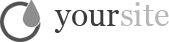
<style>
.page{position:relative;width:169px;height:42px;background:#ffffff}
.page>*{position:absolute;margin:0}
.t1{font:32px "Georgia";color:#3c3c3c}
.t2{font:32px "Georgia";color:#b7b7b7}
</style>
<div class="page">
<p class="t1" style="left:54px;top:2px;width:115px;height:31px">your<span class="t2">site</span></p>
</div>
